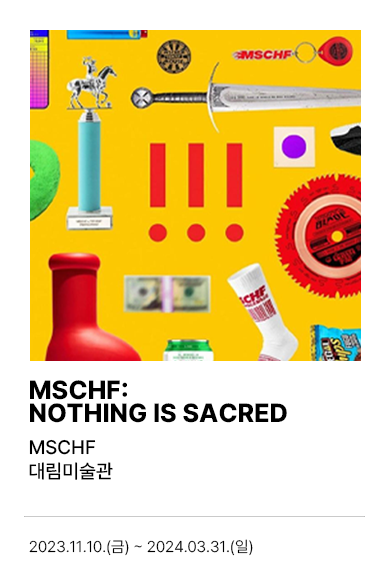
<style>
.page{position:relative;width:390px;height:585px;background:#ffffff}
.page>*{position:absolute;margin:0}
.t1{font:26px/23.4px "PretendardVariable-ExtraBold";color:#000000}
.t2{font:19.5px "PretendardVariable-Medium";color:#000000}
.t3{font:15.5px "PretendardVariable-Light";color:#000000}
</style>
<div class="page">
<p class="t1" style="left:30px;top:380px;width:257px;height:43px">MSCHF:<br>NOTHING IS SACRED</p>
<p class="t2" style="left:29px;top:439px;width:67px;height:16px">MSCHF</p>
<p class="t2" style="left:29px;top:462px;width:84px;height:18px">대림미술관</p>
<p class="t3" style="left:29px;top:539px;width:224px;height:17px">2023.11.10.(금) ~ 2024.03.31.(일)</p>
</div>
